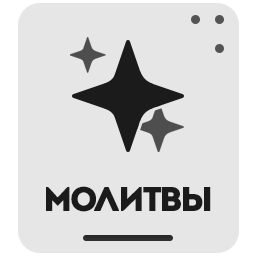
<style>
.page{position:relative;width:256px;height:256px;background:#e6e6e6}
.page>*{position:absolute;margin:0}
.t1{font:34.3px "IntroFriday";color:#1b1b1b}
</style>
<div class="page">
<p class="t1" style="left:46px;top:186px;width:165px;height:26px">МОЛИТВЫ</p>
</div>
